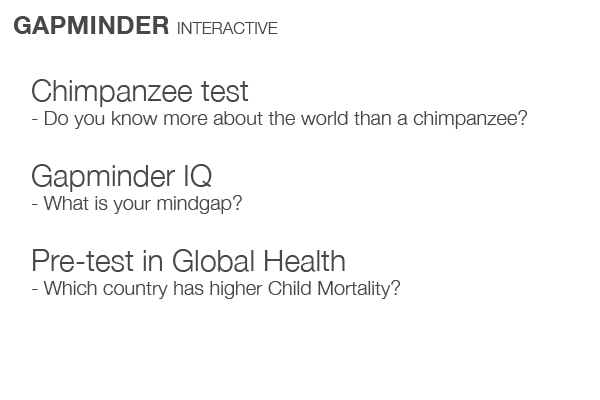
<style>
.page{position:relative;width:600px;height:400px;background:#ffffff}
.page>*{position:absolute;margin:0}
.t1{font:16.7px "HelveticaNeue-Light";color:#484848}
.t2{font:25.5px "HelveticaNeue-Bold";color:#484848}
.t3{font:20px "HelveticaNeue-Light";color:#484848}
.t4{font:30px "HelveticaNeue-Light";color:#484848}
</style>
<div class="page">
<p class="t1" style="left:13px;top:16px;width:265px;height:18px"><span class="t2">GAPMINDER </span>INTERACTIVE</p>
<p class="t3" style="left:32px;top:79px;width:495px;height:50px"><span class="t4">Chimpanzee test<br></span>- Do you know more about the world than a chimpanzee?</p>
<p class="t3" style="left:32px;top:164px;width:210px;height:50px"><span class="t4">Gapminder IQ<br></span>- What is your mindgap?</p>
<p class="t3" style="left:32px;top:249px;width:368px;height:50px"><span class="t4">Pre-test in Global Health<br></span>- Which country has higher Child Mortality?</p>
</div>
